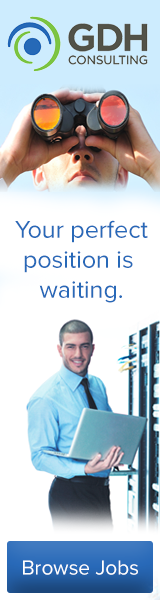
<style>
.page{position:relative;width:160px;height:600px;background:#ffffff}
.page>*{position:absolute;margin:0}
.t1{font:25px "ProximaNova-Regular";color:#2869b8}
.t2{font:20.8px "ProximaNova-Regular";color:#ffffff}
</style>
<div class="page">
<p class="t1" style="left:15px;top:220px;width:133px;height:83px;text-align:center">Your perfect<br>position is <br>waiting.</p>
<p class="t2" style="left:23px;top:560px;width:115px;height:15px">Browse Jobs</p>
</div>
